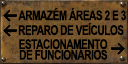
<style>
.page{position:relative;width:128px;height:64px}
.page>*{position:absolute;margin:0}
.t1{font:13.3px "Arial-BoldMT";letter-spacing:-0.04em;color:#000000;text-transform:uppercase;scale:0.75 1}
.t2{font:13.3px/10.7px "Arial-BoldMT";letter-spacing:-0.04em;color:#000000;text-transform:uppercase;scale:0.75 1}
</style>
<div class="page">
<p class="t1" style="left:18px;top:8px;width:108px;height:13px">armazém áREas 2 e 3</p>
<p class="t1" style="left:18px;top:22px;width:106px;height:14px">reparo de veículos</p>
<p class="t2" style="left:19px;top:39px;width:89px;height:21px;text-align:right">Estacionamento<br>de funcionários</p>
</div>
